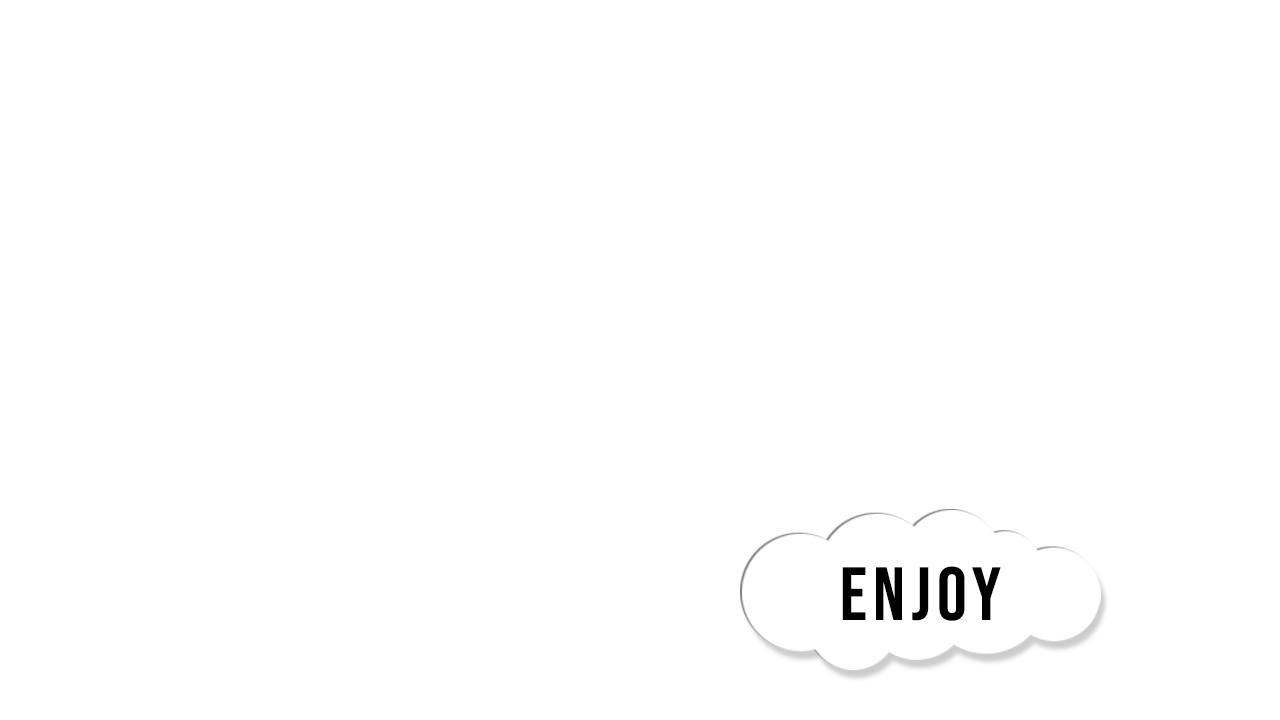
<style>
.page{position:relative;width:1280px;height:720px;background:#ffffff}
.page>*{position:absolute;margin:0}
.t1{font:75px "BebasNeue-Regular";letter-spacing:0.08em;color:#000000}
</style>
<div class="page">
<p class="t1" style="left:842px;top:566px;width:159px;height:55px">eNJOY</p>
</div>
